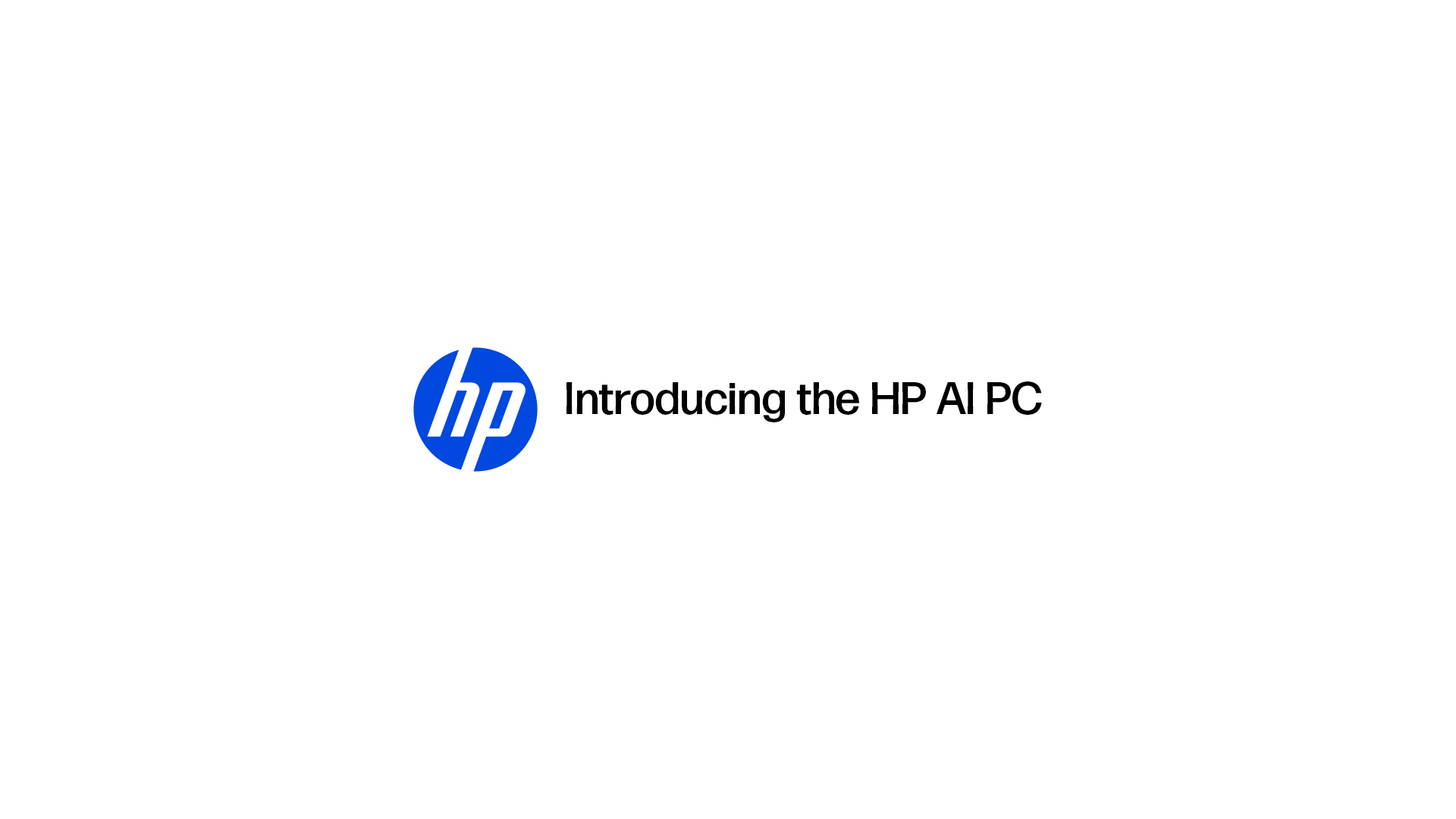
<style>
.page{position:relative;width:1456px;height:819px;background:#ffffff}
.page>*{position:absolute;margin:0}
.t1{font:45.5px "FormaDJRDisplay-Medium";letter-spacing:0.025em;color:#010000}
</style>
<div class="page">
<p class="t1" style="left:566px;top:381px;width:476px;height:41px">Introducing the HP AI PC</p>
</div>
